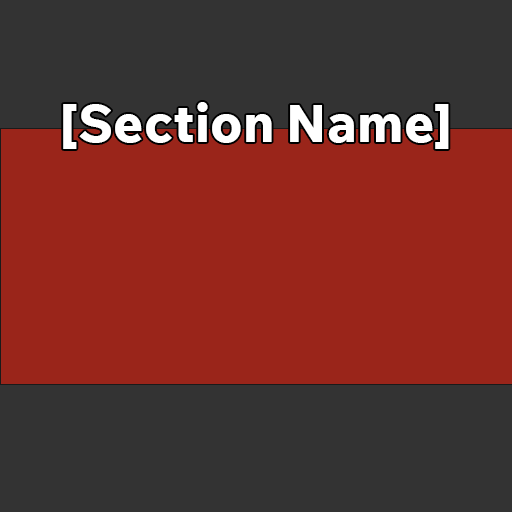
<style>
.page{position:relative;width:512px;height:512px;background:#9a251a}
.page>*{position:absolute;margin:0}
.t1{font:52.4px "WixMadeforText-ExtraBold";color:#ffffff}
</style>
<div class="page">
<p class="t1" style="left:63px;top:102px;width:386px;height:47px">[Section Name]</p>
</div>
